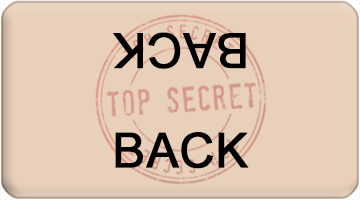
<style>
.page{position:relative;width:360px;height:200px;background:#e8d0bb}
.page>*{position:absolute;margin:0}
.t1{font:48px "ArialMT";color:#000000;font-weight:bold}
</style>
<div class="page">
<p class="t1" style="left:113px;top:32px;width:133px;height:37px;rotate:180deg">BACK</p>
<p class="t1" style="left:115px;top:132px;width:134px;height:37px">BACK</p>
</div>
